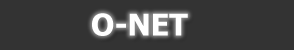
<style>
.page{position:relative;width:294px;height:50px;background:#333333}
.page>*{position:absolute;margin:0}
.t1{font:30px "Tahoma-Bold";color:#ffffff}
</style>
<div class="page">
<p class="t1" style="left:92px;top:13px;width:96px;height:23px">O-NET</p>
</div>
